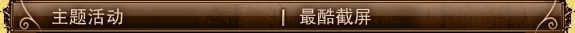
<style>
.page{position:relative;width:575px;height:33px}
.page>*{position:absolute;margin:0}
.t1{font:18.3px "SimHei";color:#eccbb0}
</style>
<div class="page">
<p class="t1" style="left:52px;top:8px;width:71px;height:17px">主题活动</p>
<p class="t1" style="left:299px;top:7px;width:72px;height:18px">最酷截屏</p>
</div>
